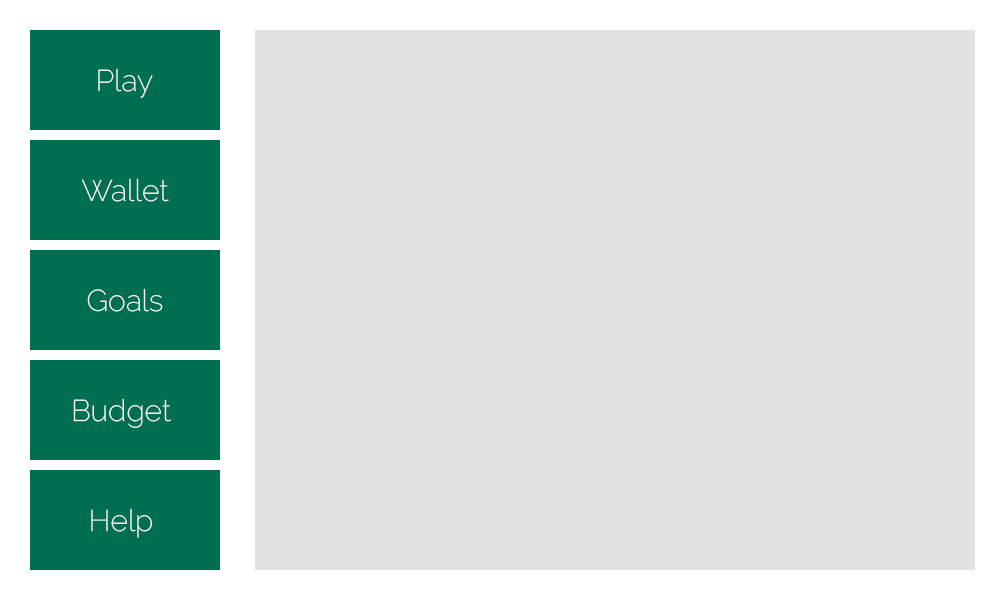
<style>
.page{position:relative;width:1000px;height:600px;background:#e1e1e1}
.page>*{position:absolute;margin:0}
.t1{font:30px "Raleway-ExtraLight";color:#ffffff}
</style>
<div class="page">
<p class="t1" style="left:98px;top:68px;width:55px;height:30px">Play</p>
<p class="t1" style="left:82px;top:178px;width:87px;height:24px">Wallet</p>
<p class="t1" style="left:87px;top:288px;width:76px;height:24px">Goals</p>
<p class="t1" style="left:73px;top:398px;width:98px;height:30px">Budget</p>
<p class="t1" style="left:91px;top:508px;width:62px;height:30px">Help</p>
</div>
